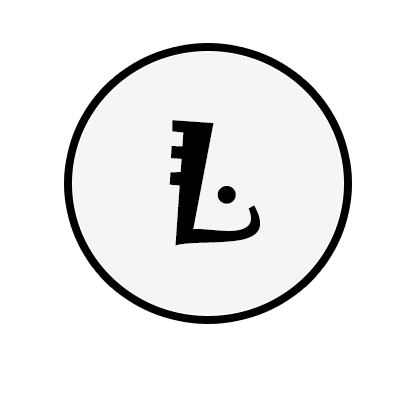
<style>
.page{position:relative;width:400px;height:400px;background:#ffffff}
.page>*{position:absolute;margin:0}
.t1{font:145.1px "Jokerman-Regular";color:#000000}
</style>
<div class="page">
<p class="t1" style="left:169px;top:120px;width:91px;height:126px">Lm</p>
</div>
